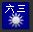
<style>
.page{position:relative;width:33px;height:32px;background:#000090}
.page>*{position:absolute;margin:0}
.t1{font:10.4px "SimSun";color:#ffffff}
</style>
<div class="page">
<p class="t1" style="left:5px;top:4px;width:20px;height:9px">六三</p>
</div>
